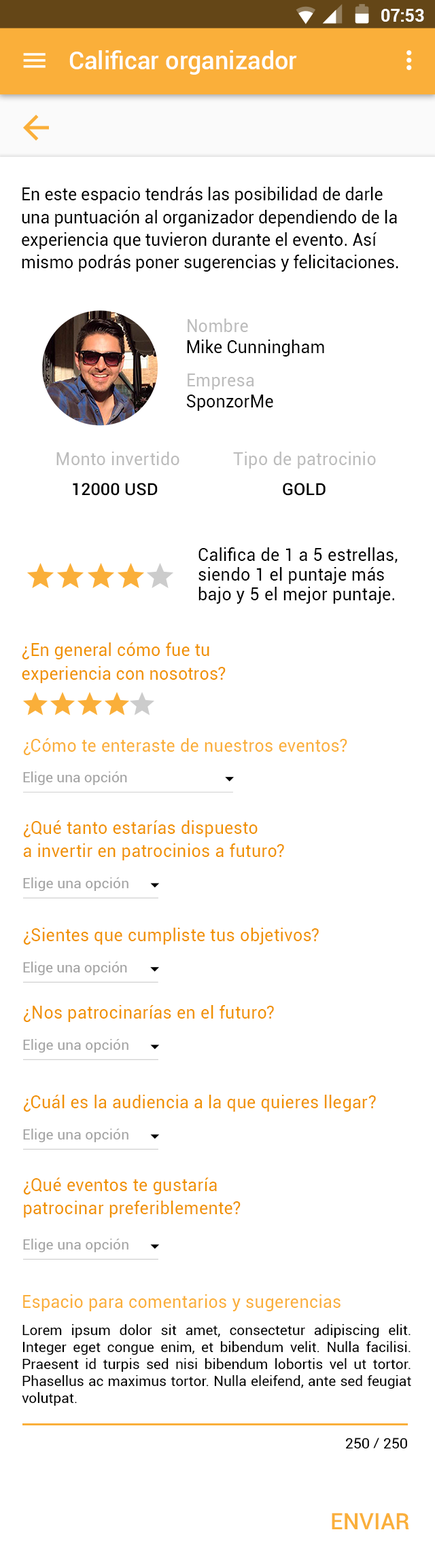
<style>
.page{position:relative;width:435px;height:1568px;background:#ffffff}
.page>*{position:absolute;margin:0}
.t1{font:16.9px "Roboto-Bold";color:#ffffff}
.t2{font:24.3px "Roboto-Medium";letter-spacing:0.005em;color:#ffffff}
.t3{font:17px/22.6px "Roboto-Regular";color:#000000}
.t4{font:17px "Roboto-Regular";letter-spacing:0.02em;color:#bcbcbc}
.t5{font:17px "Roboto-Regular";letter-spacing:0.01em;color:#000000}
.t6{font:17px "Roboto-Medium";color:#000000}
.t7{font:17px/19.8px "Roboto-Regular";letter-spacing:0.02em;color:#000000}
.t8{font:17px/24px "Roboto-Regular";letter-spacing:0.02em;color:#f09200}
.t9{font:17px "Roboto-Regular";letter-spacing:0.02em;color:#faaf3a}
.t10{font:14.2px "Roboto-Regular";letter-spacing:0.01em;color:#a3a3a3}
.t11{font:17px/23.3px "Roboto-Regular";letter-spacing:0.02em;color:#f09200}
.t12{font:14.1px "Roboto-Regular";letter-spacing:0.01em;color:#a3a3a3}
.t13{font:17px "Roboto-Regular";letter-spacing:0.02em;color:#f09200}
.t14{font:14.1px/17px "Roboto-Regular";color:#000000}
.t15{font:14.1px "Roboto-Regular";color:#000000;scale:1.03 1}
.t16{font:22.6px "Roboto-Medium";color:#faaf3a}
</style>
<div class="page">
<p class="t1" style="left:381px;top:9px;width:43px;height:13px">07:53</p>
<p class="t2" style="left:69px;top:50px;width:228px;height:25px">Calificar organizador</p>
<p class="t3" style="left:22px;top:187px;width:376px;height:85px">En este espacio tendrás las posibilidad de darle una puntuación al organizador dependiendo de la experiencia que tuvieron durante el evento. Así mismo podrás poner sugerencias y felicitaciones.</p>
<p class="t4" style="left:187px;top:318px;width:61px;height:14px">Nombre</p>
<p class="t5" style="left:187px;top:340px;width:137px;height:17px">Mike Cunningham</p>
<p class="t4" style="left:187px;top:373px;width:67px;height:17px">Empresa</p>
<p class="t5" style="left:186px;top:395px;width:87px;height:16px">SponzorMe</p>
<p class="t4" style="left:56px;top:452px;width:123px;height:13px">Monto invertido</p>
<p class="t4" style="left:233px;top:452px;width:143px;height:17px">Tipo de patrocinio</p>
<p class="t6" style="left:73px;top:483px;width:85px;height:13px">12000 USD</p>
<p class="t6" style="left:282px;top:483px;width:43px;height:13px">GOLD</p>
<p class="t7" style="left:198px;top:547px;width:199px;height:57px">Califica de 1 a 5 estrellas, siendo 1 el puntaje más bajo y 5 el mejor puntaje.</p>
<p class="t8" style="left:22px;top:642px;width:203px;height:41px">¿En general cómo fue tu <br>experiencia con nosotros?</p>
<p class="t9" style="left:23px;top:738px;width:324px;height:17px">¿Cómo te enteraste de nuestros eventos?</p>
<p class="t10" style="left:23px;top:771px;width:104px;height:14px">Elige una opción</p>
<p class="t11" style="left:23px;top:820px;width:261px;height:40px">¿Qué tanto estarías dispuesto <br>a invertir en patrocinios a futuro?</p>
<p class="t12" style="left:23px;top:877px;width:105px;height:14px">Elige una opción</p>
<p class="t13" style="left:23px;top:928px;width:295px;height:17px">¿Sientes que cumpliste tus objetivos?</p>
<p class="t12" style="left:23px;top:962px;width:104px;height:13px">Elige una opción</p>
<p class="t13" style="left:23px;top:1005px;width:251px;height:17px">¿Nos patrocinarías en el futuro?</p>
<p class="t12" style="left:23px;top:1039px;width:105px;height:14px">Elige una opción</p>
<p class="t13" style="left:23px;top:1095px;width:353px;height:17px">¿Cuál es la audiencia a la que quieres llegar?</p>
<p class="t12" style="left:23px;top:1129px;width:105px;height:13px">Elige una opción</p>
<p class="t11" style="left:23px;top:1178px;width:217px;height:40px">¿Qué eventos te gustaría <br>patrocinar preferiblemente?</p>
<p class="t12" style="left:23px;top:1239px;width:105px;height:13px">Elige una opción</p>
<p class="t9" style="left:23px;top:1294px;width:317px;height:17px">Espacio para comentarios y sugerencias</p>
<p class="t14" style="left:22px;top:1324px;width:389px;height:82px;text-align:justify">Lorem ipsum dolor sit amet, consectetur adipiscing elit. Integer eget congue enim, et bibendum velit. Nulla facilisi. Praesent id turpis sed nisi bibendum lobortis vel ut tortor. Phasellus ac maximus tortor. Nulla eleifend, ante sed feugiat volutpat.</p>
<p class="t15" style="left:345px;top:1438px;width:62px;height:10px">250 / 250</p>
<p class="t16" style="left:331px;top:1513px;width:78px;height:16px">ENVIAR</p>
</div>
